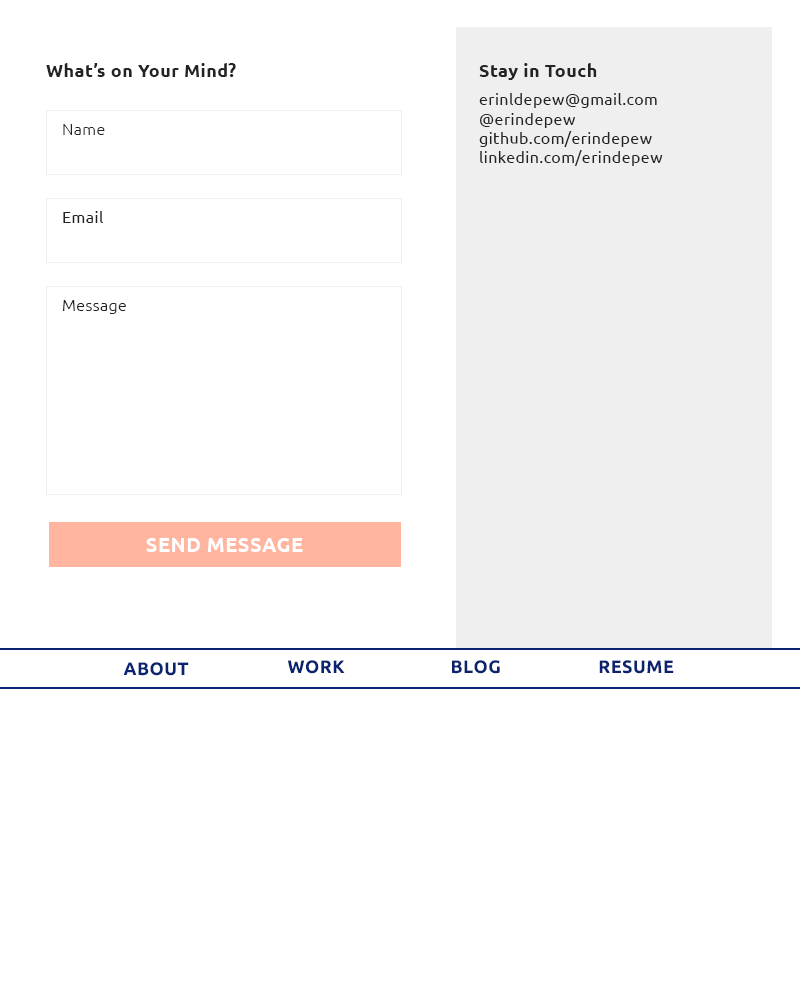
<style>
.page{position:relative;width:800px;height:1000px;background:#ffffff}
.page>*{position:absolute;margin:0}
.t1{font:18px "Ubuntu-Bold";letter-spacing:0.025em;color:#232323}
.t2{font:16px "Ubuntu";letter-spacing:0.025em;color:#232323}
.t3{font:16px "Ubuntu-Light";letter-spacing:0.025em;color:#232323}
.t4{font:20px "Ubuntu-Bold";letter-spacing:0.025em;color:#ffffff}
.t5{font:18px "Ubuntu-Bold";letter-spacing:0.025em;color:#0c2370}
</style>
<div class="page">
<p class="t1" style="left:46px;top:63px;width:190px;height:14px">What’s on Your Mind?</p>
<p class="t1" style="left:479px;top:63px;width:118px;height:17px">Stay in Touch</p>
<p class="t2" style="left:479px;top:93px;width:184px;height:73px">erinldepew@gmail.com<br>@erindepew<br>github.com/erindepew<br>linkedin.com/erindepew</p>
<p class="t3" style="left:63px;top:124px;width:42px;height:11px">Name</p>
<p class="t2" style="left:63px;top:211px;width:40px;height:12px">Email</p>
<p class="t3" style="left:63px;top:300px;width:63px;height:14px">Message</p>
<p class="t4" style="left:146px;top:538px;width:157px;height:14px">SEND MESSAGE</p>
<p class="t5" style="left:123px;top:662px;width:66px;height:14px">ABOUT</p>
<p class="t5" style="left:288px;top:660px;width:57px;height:14px">WORK</p>
<p class="t5" style="left:452px;top:660px;width:48px;height:14px">BLOG</p>
<p class="t5" style="left:599px;top:660px;width:75px;height:14px">RESUME</p>
</div>
